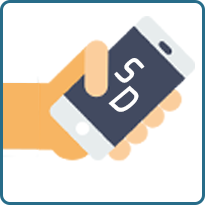
<style>
.page{position:relative;width:205px;height:205px;background:#ffffff}
.page>*{position:absolute;margin:0}
.t1{font:14.7px/25.6px "Exo-DemiBoldItalic";color:#fefefe;scale:0.84 1}
</style>
<div class="page">
<p class="t1" style="left:108px;top:58px;width:37px;height:54px;rotate:42deg">S<br>  D</p>
</div>
